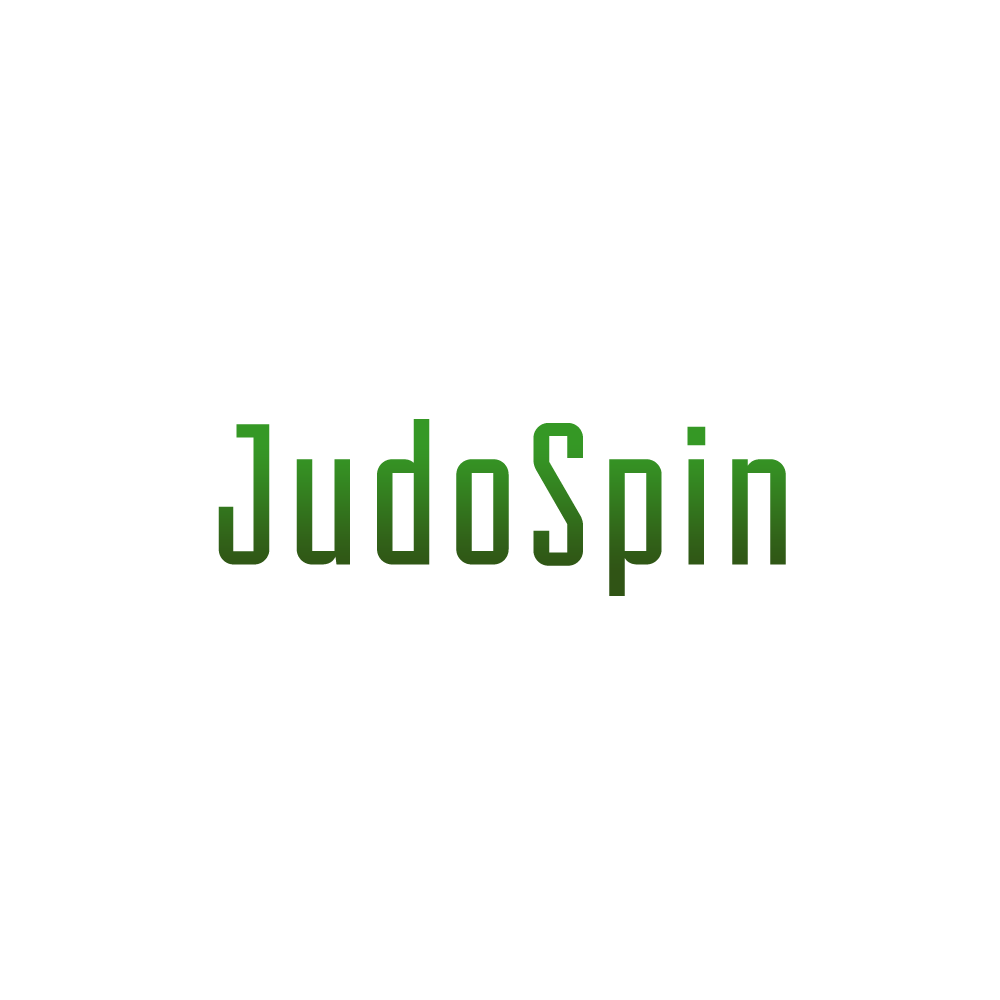
<style>
.page{position:relative;width:1000px;height:1000px;background:#ffffff}
.page>*{position:absolute;margin:0}
.t1{font:212.5px "Fairview-Regular";letter-spacing:0.05em}
</style>
<div class="page">
<p class="t1" style="left:218px;top:419px;width:568px;height:177px">JudoSpin</p>
</div>
